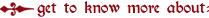
<style>
.page{position:relative;width:209px;height:18px;background:#ffffff}
.page>*{position:absolute;margin:0}
.t1{font:14.7px "Kelmscott-Regular";color:#8e0a12}
</style>
<div class="page">
<p class="t1" style="left:37px;top:1px;width:168px;height:16px">get to know more about</p>
</div>
